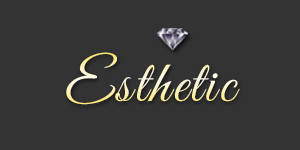
<style>
.page{position:relative;width:300px;height:150px;background:#333333}
.page>*{position:absolute;margin:0}
.t1{font:60.2px "GreatVibes-Regular";letter-spacing:0.05em}
</style>
<div class="page">
<p class="t1" style="left:66px;top:52px;width:174px;height:53px">Esthetic</p>
</div>
